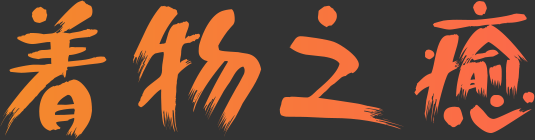
<style>
.page{position:relative;width:535px;height:140px;background:#333333}
.page>*{position:absolute;margin:0}
.t1{font:140px "Hakuu";color:#f77d39}
</style>
<div class="page">
<p class="t1" style="left:0px;top:0px;width:535px;height:140px">着物之癒</p>
</div>
